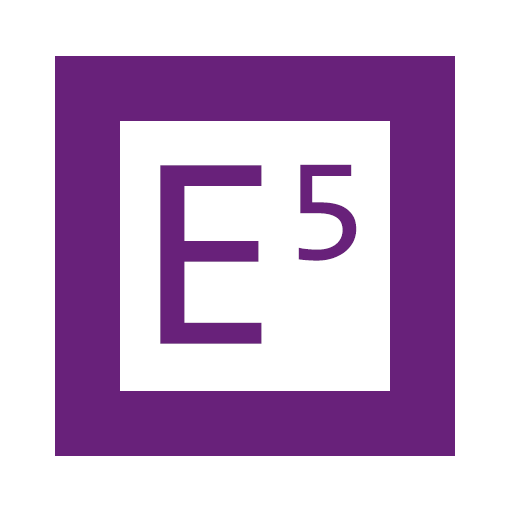
<style>
.page{position:relative;width:512px;height:512px;background:#ffffff}
.page>*{position:absolute;margin:0}
.t1{font:209.3px "Consolas";color:#68217a}
.t2{font:253.4px "Consolas";color:#68217a}
</style>
<div class="page">
<p class="t1" style="left:160px;top:164px;width:197px;height:180px">E<span class="t2">5</span></p>
</div>
